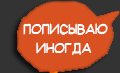
<style>
.page{position:relative;width:120px;height:73px;background:#d95120}
.page>*{position:absolute;margin:0}
.t1{font:16px "SuplexmentaryComicNC";color:#ffffff;scale:0.8 1}
</style>
<div class="page">
<p class="t1" style="left:23px;top:23px;width:85px;height:33px">ПОПИСЫВАЮ <br>     ИНОГДА</p>
</div>
